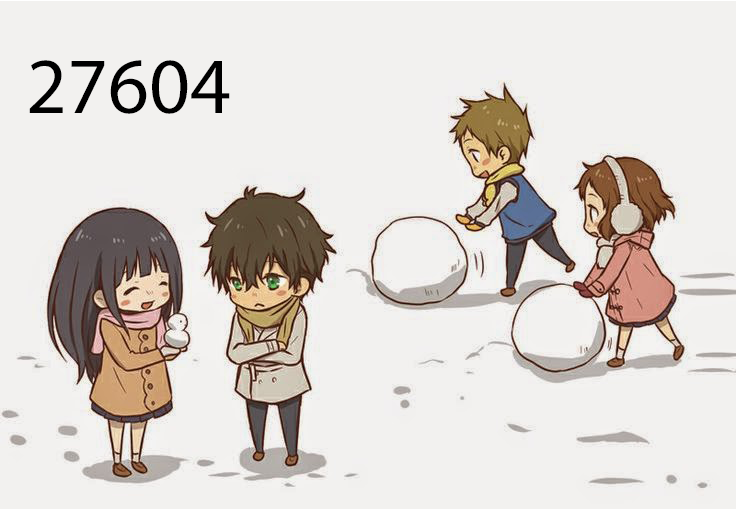
<style>
.page{position:relative;width:736px;height:509px;background:#f2f1ef}
.page>*{position:absolute;margin:0}
.t1{font:80px "MyriadPro-Regular";color:#000000}
</style>
<div class="page">
<p class="t1" style="left:29px;top:60px;width:201px;height:54px">27604</p>
</div>
